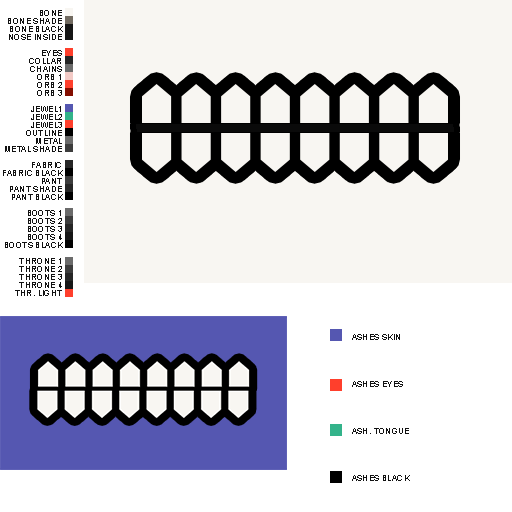
<style>
.page{position:relative;width:512px;height:512px;background:#f8f6f2}
.page>*{position:absolute;margin:0}
.t1{font:8px/8px "ArialMT";letter-spacing:0.05em;color:#111111}
.t2{font:8px/47px "ArialMT";letter-spacing:0.05em;color:#111111}
</style>
<div class="page">
<p class="t1" style="left:3px;top:10px;width:60px;height:286px;text-align:right">BONE<br>BONE SHADE<br>BONE BLACK<br>NOSE INSIDE<br><br>EYES<br>COLLAR<br>CHAINS<br>ORB 1<br>ORB 2<br>ORB 3<br><br>JEWEL1<br>JEWEL2<br>JEWEL3<br>OUTLINE<br>METAL<br>METAL SHADE<br><br>FABRIC<br>FABRIC BLACK<br>PANT<br>PANT SHADE<br>PANT BLACK<br><br>BOOTS 1<br>BOOTS 2<br>BOOTS 3<br>BOOTS 4<br>BOOTS BLACK<br><br>THRONE 1<br>THRONE 2<br>THRONE 3<br>THRONE 4<br>THR. LIGHT</p>
<p class="t2" style="left:352px;top:334px;width:58px;height:147px">ASHES SKIN<br>ASHES EYES<br>ASH. TONGUE<br>ASHES BLACK</p>
</div>
